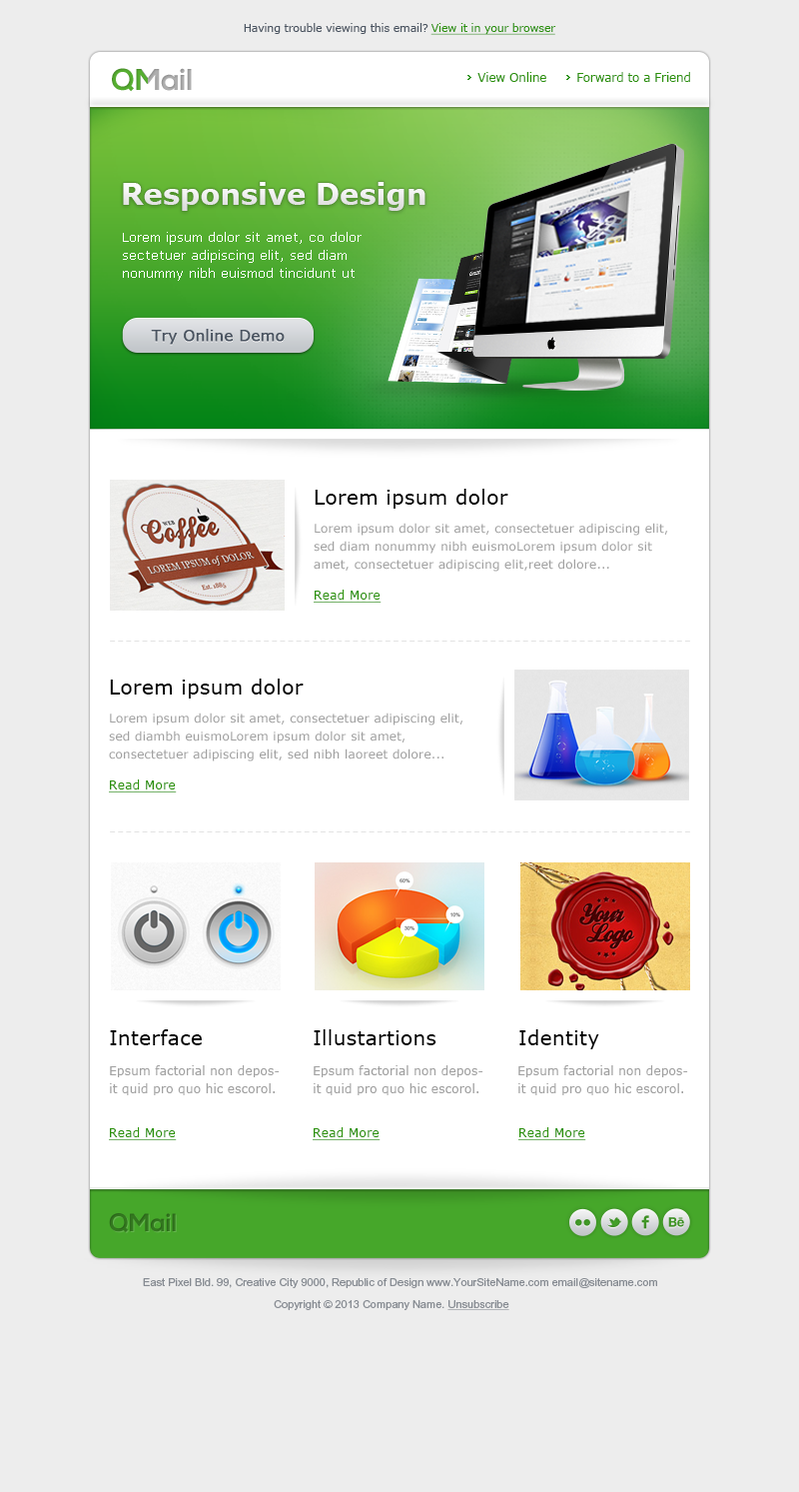
<style>
.page{position:relative;width:799px;height:1492px;background:#ededed}
.page>*{position:absolute;margin:0}
.t1{font:11px "Verdana";letter-spacing:-0.015em;color:#4a5461}
.t2{font:11px "Verdana";letter-spacing:-0.015em;color:#2b9208;text-decoration:underline}
.t3{font:11px "Verdana";letter-spacing:-0.015em;color:#2b9208}
.t4{font:12px "Verdana";letter-spacing:-0.015em;color:#2b9208}
.t5{font:29px "Verdana-Bold";color:#ffffff}
.t6{font:13px/18px "Verdana";color:#ffffff}
.t7{font:15px "Verdana";color:#4a5461;font-weight:bold}
.t8{font:20px "Verdana";letter-spacing:0.018em;color:#000000}
.t9{font:12px/18px "Verdana";letter-spacing:0.018em;color:#a1a1a1}
.t10{font:12px "Verdana";letter-spacing:0.028em;color:#2b9208;text-decoration:underline}
.t11{font:20px "Verdana";letter-spacing:0.018em;color:#010101}
.t12{font:11px "ArialMT";color:#878c93}
.t13{font:11px "ArialMT";color:#878c93;text-decoration:underline}
</style>
<div class="page">
<p class="t1" style="left:244px;top:23px;width:185px;height:11px">Having trouble viewing this email?</p>
<p class="t2" style="left:431px;top:23px;width:126px;height:12px"><span class="t3"> </span>View it in your browser</p>
<p class="t4" style="left:478px;top:72px;width:69px;height:10px">View Online</p>
<p class="t4" style="left:578px;top:72px;width:112px;height:10px">Forward to a Friend</p>
<p class="t5" style="left:123px;top:182px;width:303px;height:29px">Responsive Design</p>
<p class="t6" style="left:123px;top:232px;width:239px;height:49px">Lorem ipsum dolor sit amet, co dolor sectetuer adipiscing elit, sed diam nonummy nibh euismod tincidunt ut laoreet</p>
<p class="t7" style="left:151px;top:329px;width:134px;height:16px">Try Online Demo</p>
<p class="t8" style="left:315px;top:489px;width:194px;height:20px">Lorem ipsum dolor</p>
<p class="t9" style="left:314px;top:523px;width:354px;height:49px">Lorem ipsum dolor sit amet, consectetuer adipiscing elit, sed diam nonummy nibh euismoLorem ipsum dolor sit amet, consectetuer adipiscing elit,reet dolore...</p>
<p class="t10" style="left:314px;top:590px;width:68px;height:13px">Read More</p>
<p class="t8" style="left:110px;top:678px;width:194px;height:20px">Lorem ipsum dolor</p>
<p class="t9" style="left:109px;top:712px;width:355px;height:49px">Lorem ipsum dolor sit amet, consectetuer adipiscing elit, sed diambh euismoLorem ipsum dolor sit amet, consectetuer adipiscing elit, sed nibh laoreet dolore...</p>
<p class="t10" style="left:109px;top:779px;width:68px;height:13px">Read More</p>
<p class="t11" style="left:110px;top:1029px;width:92px;height:16px">Interface</p>
<p class="t11" style="left:314px;top:1029px;width:123px;height:16px">Illustartions</p>
<p class="t11" style="left:520px;top:1029px;width:80px;height:20px">Identity</p>
<p class="t9" style="left:110px;top:1065px;width:170px;height:30px">Epsum factorial non deposit quid pro quo hic escorol.</p>
<p class="t9" style="left:314px;top:1065px;width:170px;height:30px">Epsum factorial non deposit quid pro quo hic escorol.</p>
<p class="t9" style="left:519px;top:1065px;width:169px;height:30px">Epsum factorial non deposit quid pro quo hic escorol.</p>
<p class="t10" style="left:109px;top:1127px;width:68px;height:13px">Read More</p>
<p class="t10" style="left:313px;top:1127px;width:68px;height:13px">Read More</p>
<p class="t10" style="left:519px;top:1127px;width:68px;height:13px">Read More</p>
<p class="t12" style="left:143px;top:1278px;width:514px;height:10px">East Pixel Bld. 99, Creative City 9000, Republic of Design www.YourSiteName.com email@sitename.com</p>
<p class="t12" style="left:274px;top:1300px;width:236px;height:10px">Copyright © 2013 Company Name. <span class="t13">Unsubscribe</span></p>
</div>
